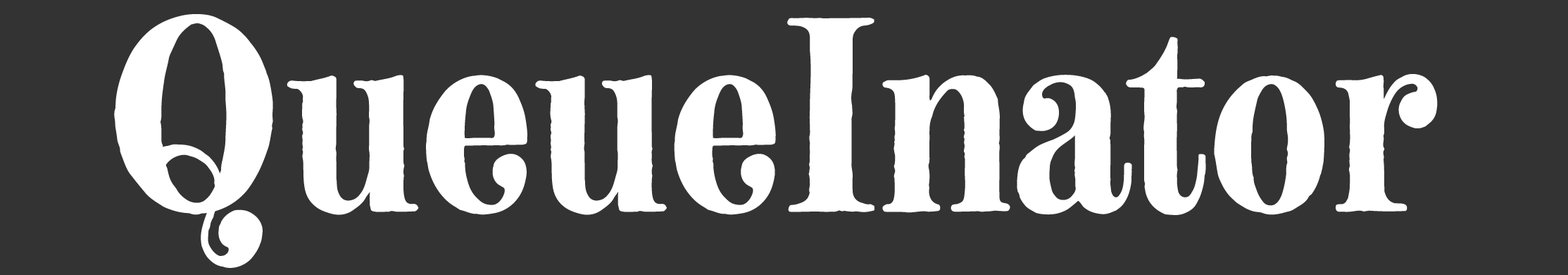
<style>
.page{position:relative;width:1568px;height:275px;background:#333333}
.page>*{position:absolute;margin:0}
.t1{font:241.9px "NeatoSerif-Regular";letter-spacing:0.005em;color:#ffffff;scale:0.94 1}
</style>
<div class="page">
<p class="t1" style="left:114px;top:14px;width:1324px;height:254px">QueueInator</p>
</div>
